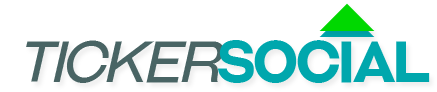
<style>
.page{position:relative;width:437px;height:92px;background:#ffffff}
.page>*{position:absolute;margin:0}
.t1{font:57px "GalderglynnTitlingBk-Italic";letter-spacing:-0.04em;color:#496464}
.t2{font:57px "GalderglynnTitlingRg-Bold";letter-spacing:-0.04em;color:#00a7ad}
</style>
<div class="page">
<p class="t1" style="left:26px;top:40px;width:404px;height:43px">TICKER<span class="t2">SOCIAL</span></p>
</div>
